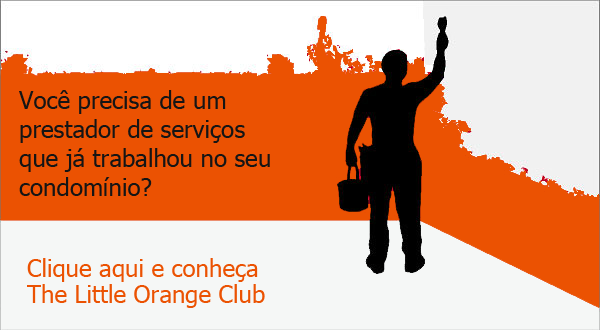
<style>
.page{position:relative;width:600px;height:330px;background:#eb5202}
.page>*{position:absolute;margin:0}
.t1{font:24px "Tahoma";color:#151515}
.t2{font:24px "Tahoma";color:#eb5202}
</style>
<div class="page">
<p class="t1" style="left:19px;top:90px;width:251px;height:106px">Você precisa de um  prestador de serviços <br>que já trabalhou no seu <br>condomínio?</p>
<p class="t2" style="left:27px;top:258px;width:231px;height:24px">Clique aqui e conheça</p>
<p class="t2" style="left:27px;top:284px;width:238px;height:24px">The Little Orange Club</p>
</div>
